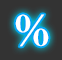
<style>
.page{position:relative;width:62px;height:60px;background:#333333}
.page>*{position:absolute;margin:0}
.t1{font:44.9px "FZCHSJW--GB1-0";color:#ffffff}
</style>
<div class="page">
<p class="t1" style="left:15px;top:14px;width:34px;height:33px">%</p>
</div>
